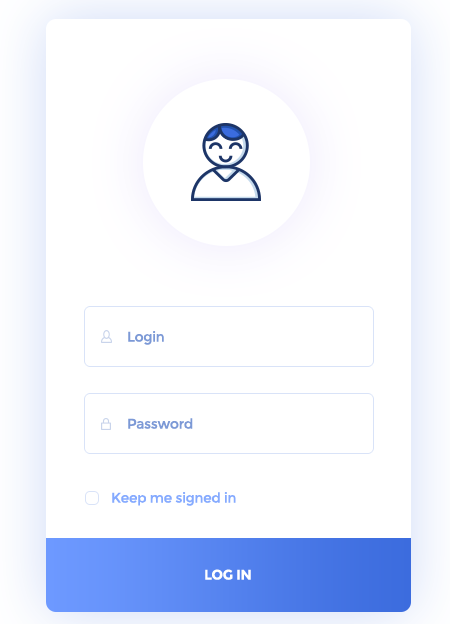
<style>
.page{position:relative;width:450px;height:624px;background:#ffffff}
.page>*{position:absolute;margin:0}
.t1{font:14px "Montserrat-Regular";letter-spacing:-0.025em;color:#7c99d6}
.t2{font:14px "Montserrat-Regular";letter-spacing:-0.025em;color:#85aaff}
.t3{font:14px "Montserrat-Bold";letter-spacing:-0.025em;color:#ffffff}
</style>
<div class="page">
<p class="t1" style="left:128px;top:331px;width:36px;height:14px">Login</p>
<p class="t1" style="left:128px;top:418px;width:65px;height:11px">Password</p>
<p class="t2" style="left:112px;top:492px;width:124px;height:14px">Keep me signed in</p>
<p class="t3" style="left:205px;top:569px;width:46px;height:11px">LOG IN</p>
</div>
